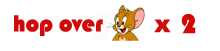
<style>
.page{position:relative;width:220px;height:51px;background:#ffffff}
.page>*{position:absolute;margin:0}
.t1{font:24.2px "Bauhaus93";color:#d2080d}
.t2{font:28px "Bauhaus93";color:#d20809}
.t3{font:24.2px "Arial-Black";color:#d20809}
</style>
<div class="page">
<p class="t1" style="left:14px;top:15px;width:89px;height:21px">hop over</p>
<p class="t2" style="left:181px;top:14px;width:15px;height:20px">2</p>
<p class="t3" style="left:154px;top:19px;width:17px;height:14px">x</p>
</div>
